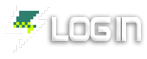
<style>
.page{position:relative;width:147px;height:59px;background:#ffffff}
.page>*{position:absolute;margin:0}
.t1{font:37.2px "TerminatorTwo";color:#fefefe;scale:0.72 1}
</style>
<div class="page">
<p class="t1" style="left:52px;top:17px;width:89px;height:24px">LOGIN</p>
</div>
